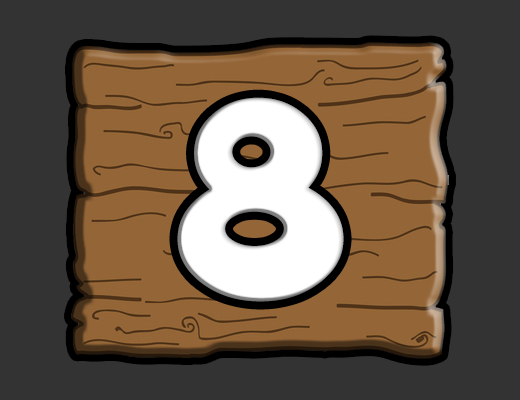
<style>
.page{position:relative;width:520px;height:400px;background:#333333}
.page>*{position:absolute;margin:0}
.t1{font:300px "Funhouse";color:#ffffff}
</style>
<div class="page">
<p class="t1" style="left:177px;top:97px;width:167px;height:205px">8</p>
</div>
